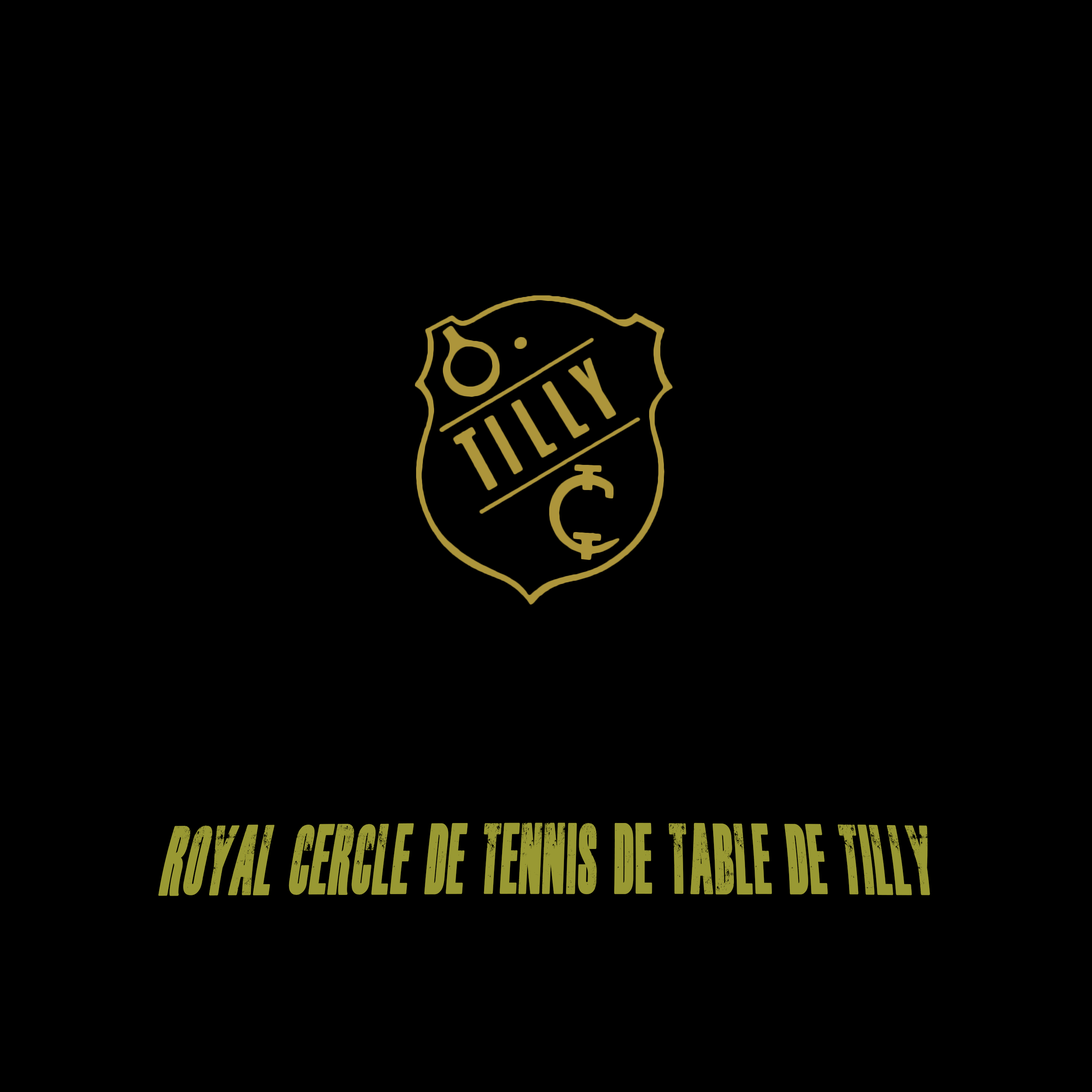
<style>
.page{position:relative;width:1092px;height:1092px;background:#000000}
.page>*{position:absolute;margin:0}
.t1{font:66.6px "DeadKansas";color:#999933;scale:0.52 1}
</style>
<div class="page">
<p class="t1" style="left:158px;top:823px;width:772px;height:73px">Royal cercle de Tennis de table de Tilly</p>
</div>
